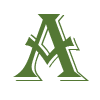
<style>
.page{position:relative;width:100px;height:100px;background:#ffffff}
.page>*{position:absolute;margin:0}
.t1{font:100px "Algerian";color:#547834}
</style>
<div class="page">
<p class="t1" style="left:13px;top:14px;width:76px;height:67px">A</p>
</div>
